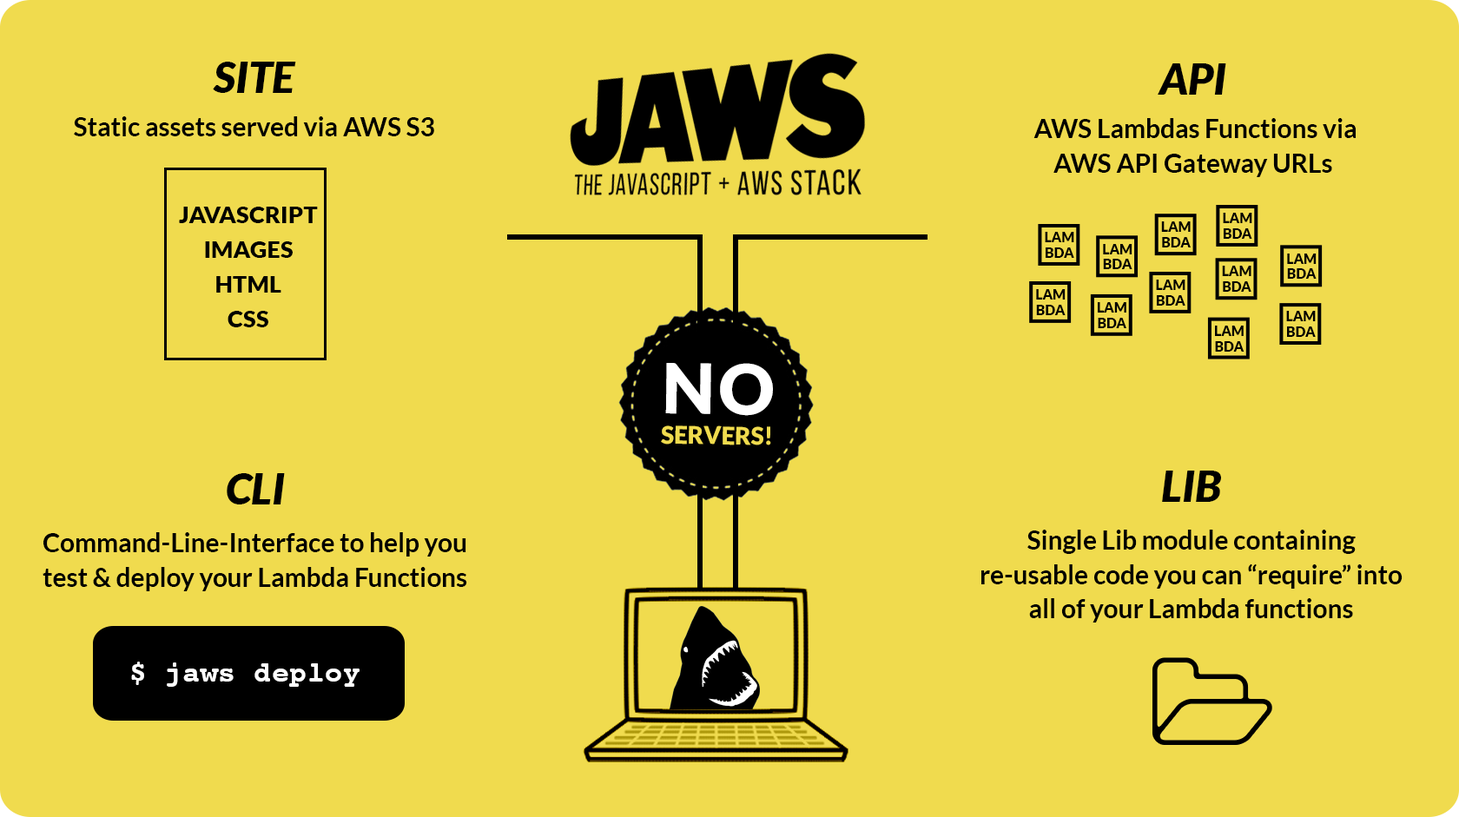
<style>
.page{position:relative;width:1459px;height:817px;background:#f0db4e}
.page>*{position:absolute;margin:0}
.t1{font:25.9px/43.2px "Lato-Bold";color:#000000}
.t2{font:43.2px/43.2px "Lato-BlackItalic";color:#000000}
.t3{font:25.9px/34.6px "Lato-Bold";color:#000000}
.t4{font:23.2px/34.7px "Lato-Black";letter-spacing:0.015em;color:#000000}
.t5{font:13.6px/15.5px "Lato-Black";color:#000000}
.t6{font:13.6px/15.5px "Lato-Black";letter-spacing:0.015em;color:#000000}
.t7{font:69.5px "Lato-Black";letter-spacing:0.05em;color:#ffffff}
.t8{font:24px "Lato-Black";color:#f0db4e}
.t9{font:43.2px/47.5px "Lato-BlackItalic";color:#000000}
.t10{font:25.9px/47.5px "Lato-Bold";color:#000000}
.t11{font:28.9px "Courier-Bold";letter-spacing:0.015em;color:#ffffff}
</style>
<div class="page">
<p class="t1" style="left:74px;top:62px;width:360px;height:74px;text-align:center"><span class="t2">SITE<br></span>Static assets served via AWS S3</p>
<p class="t1" style="left:1034px;top:63px;width:322px;height:114px;text-align:center"><span class="t2">API<br> </span>AWS Lambdas Functions via <br><span class="t3">AWS API Gateway URLs</span></p>
<p class="t4" style="left:179px;top:207px;width:139px;height:120px;text-align:center">JAVASCRIPT<br>IMAGES<br>HTML<br>CSS</p>
<p class="t5" style="left:1161px;top:221px;width:30px;height:27px;text-align:center">LAM<br><span class="t6">BDA</span></p>
<p class="t5" style="left:1223px;top:213px;width:29px;height:26px;text-align:center">LAM<br><span class="t6">BDA</span></p>
<p class="t5" style="left:1045px;top:232px;width:29px;height:26px;text-align:center">LAM<br><span class="t6">BDA</span></p>
<p class="t5" style="left:1103px;top:244px;width:30px;height:25px;text-align:center">LAM<br><span class="t6">BDA</span></p>
<p class="t5" style="left:1287px;top:254px;width:30px;height:25px;text-align:center">LAM<br><span class="t6">BDA</span></p>
<p class="t5" style="left:1222px;top:266px;width:30px;height:26px;text-align:center">LAM<br><span class="t6">BDA</span></p>
<p class="t5" style="left:1156px;top:280px;width:29px;height:26px;text-align:center">LAM<br><span class="t6">BDA</span></p>
<p class="t5" style="left:1036px;top:289px;width:30px;height:26px;text-align:center">LAM<br><span class="t6">BDA</span></p>
<p class="t5" style="left:1098px;top:302px;width:28px;height:26px;text-align:center">LAM<br><span class="t6">BDA</span></p>
<p class="t5" style="left:1286px;top:311px;width:30px;height:26px;text-align:center">LAM<br><span class="t6">BDA</span></p>
<p class="t5" style="left:1215px;top:326px;width:30px;height:26px;text-align:center">LAM<br><span class="t6">BDA</span></p>
<p class="t7" style="left:665px;top:363px;width:108px;height:53px;rotate:1deg">NO</p>
<p class="t8" style="left:661px;top:426px;width:110px;height:20px;rotate:1deg">SERVERS!</p>
<p class="t3" style="left:43px;top:473px;width:424px;height:118px;text-align:center"><span class="t9">CLI<br></span><span class="t10">Command-Line-Interface to he</span>lp you <br>test &amp; deploy your Lambda Functions</p>
<p class="t3" style="left:981px;top:471px;width:422px;height:152px;text-align:center"><span class="t9">LIB<br></span><span class="t10">Single Lib module contain</span>ing <br>re-usable code you can “require” into<br>all of your Lambda functions</p>
<p class="t11" style="left:131px;top:662px;width:229px;height:25px">$ jaws deploy</p>
</div>
